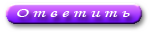
<style>
.page{position:relative;width:150px;height:32px}
.page>*{position:absolute;margin:0}
.t1{font:14px "MonotypeCorsiva";letter-spacing:0.2em;color:#ffffff;scale:1.5 1}
</style>
<div class="page">
<p class="t1" style="left:17px;top:9px;width:113px;height:8px">Ответить</p>
</div>
